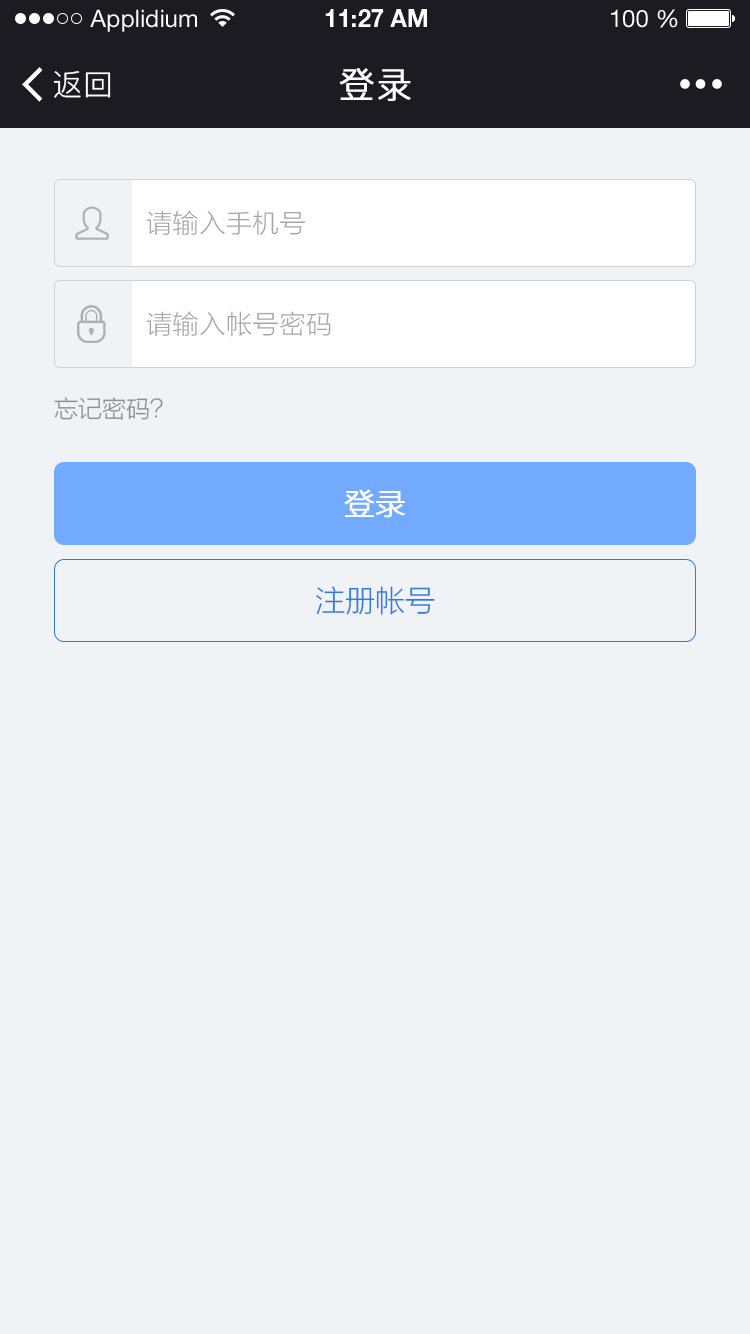
<style>
.page{position:relative;width:750px;height:1334px;background:#eff3f6}
.page>*{position:absolute;margin:0}
.t1{font:24px "HelveticaNeueLTStd-Roman";color:#ffffff}
.t2{font:24px "HelveticaNeueLTStd-Bd";color:#ffffff}
.t3{font:30px "PingFang-SC-Regular";letter-spacing:0.025em;color:#ffffff}
.t4{font:36px "PingFang-SC-Regular";letter-spacing:0.025em;color:#ffffff;font-weight:bold}
.t5{font:26px "FZLTXHK--GBK1-0";letter-spacing:0.025em;color:#a6a6a6}
.t6{font:24px "FZLTXHK--GBK1-0";color:#8e8f91}
.t7{font:30px "FZLTXHK--GBK1-0";color:#ffffff;font-weight:bold}
.t8{font:30px "FZLTXHK--GBK1-0";color:#3479e1}
</style>
<div class="page">
<p class="t1" style="left:90px;top:9px;width:107px;height:23px">Applidium</p>
<p class="t2" style="left:325px;top:9px;width:102px;height:18px">11:27 AM</p>
<p class="t1" style="left:611px;top:9px;width:67px;height:19px">100 %</p>
<p class="t3" style="left:53px;top:71px;width:58px;height:27px">返回</p>
<p class="t4" style="left:339px;top:68px;width:72px;height:33px">登录</p>
<p class="t5" style="left:146px;top:210px;width:159px;height:25px">请输入手机号</p>
<p class="t5" style="left:146px;top:311px;width:185px;height:26px">请输入帐号密码</p>
<p class="t6" style="left:54px;top:397px;width:109px;height:23px">忘记密码？</p>
<p class="t7" style="left:344px;top:489px;width:61px;height:29px">登录</p>
<p class="t8" style="left:316px;top:586px;width:119px;height:29px">注册帐号</p>
</div>
